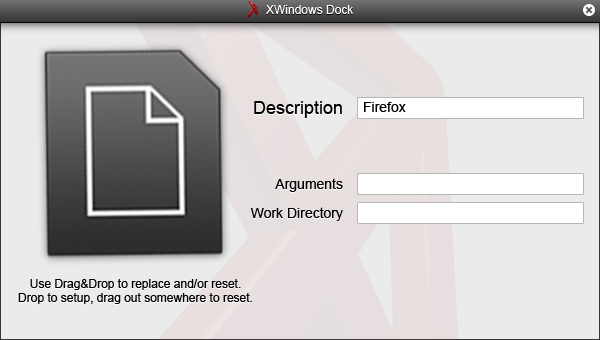
<style>
.page{position:relative;width:600px;height:340px;background:#ebebeb}
.page>*{position:absolute;margin:0}
.t1{font:12px "ArialMT";color:#ffffff}
.t2{font:18px "ArialMT"}
.t3{font:18px "ArialMT";color:#000000}
.t4{font:14px "ArialMT";color:#000000}
.t5{font:14px "ArialMT"}
.t6{font:12px "ArialMT"}
.t7{font:12px "ArialMT";color:#000000}
</style>
<div class="page">
<p class="t1" style="left:266px;top:5px;width:87px;height:9px">XWindows Dock</p>
<p class="t2" style="left:254px;top:102px;width:88px;height:17px">Description</p>
<p class="t3" style="left:254px;top:101px;width:88px;height:17px">Description</p>
<p class="t4" style="left:364px;top:102px;width:42px;height:10px">Firefox</p>
<p class="t5" style="left:275px;top:179px;width:68px;height:14px">Arguments</p>
<p class="t4" style="left:275px;top:178px;width:68px;height:14px">Arguments</p>
<p class="t5" style="left:250px;top:208px;width:93px;height:14px">Work Directory</p>
<p class="t4" style="left:250px;top:207px;width:93px;height:14px">Work Directory</p>
<p class="t6" style="left:18px;top:280px;width:234px;height:25px;text-align:center">Use Drag&amp;Drop to replace and/or reset. <br>Drop to setup, drag out somewhere to reset.</p>
<p class="t7" style="left:18px;top:279px;width:234px;height:25px;text-align:center">Use Drag&amp;Drop to replace and/or reset. <br>Drop to setup, drag out somewhere to reset.</p>
</div>
